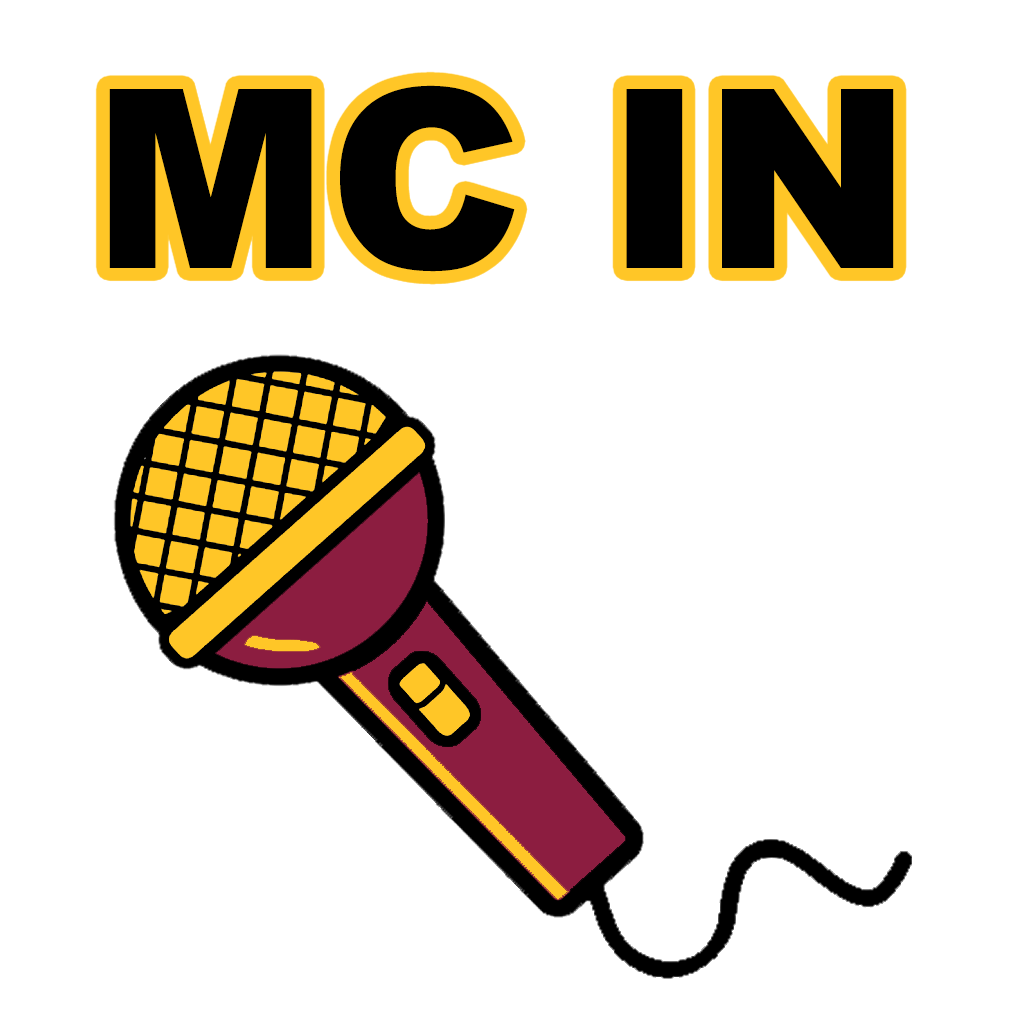
<style>
.page{position:relative;width:1024px;height:1024px;background:#ffffff}
.page>*{position:absolute;margin:0}
.t1{font:250px "Arial-Black";color:#000000}
</style>
<div class="page">
<p class="t1" style="left:109px;top:85px;width:785px;height:187px">MC IN</p>
</div>
